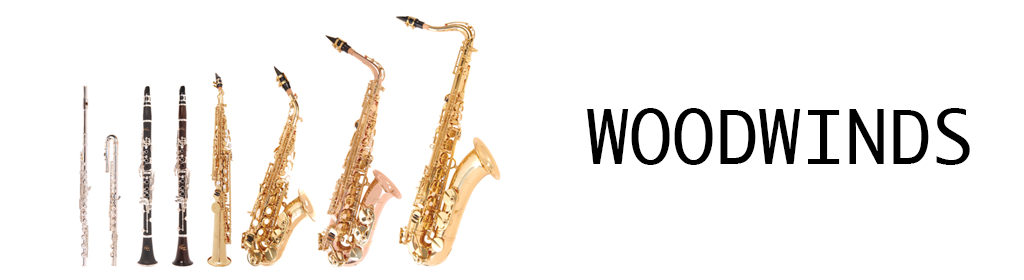
<style>
.page{position:relative;width:1024px;height:280px;background:#ffffff}
.page>*{position:absolute;margin:0}
.t1{font:72px "Ayuthaya";color:#000000}
</style>
<div class="page">
<p class="t1" style="left:587px;top:108px;width:383px;height:57px">WOODWINDS</p>
</div>
